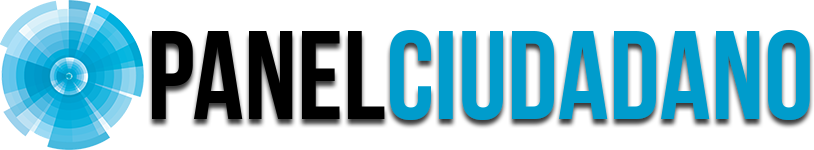
<style>
.page{position:relative;width:814px;height:150px;background:#ffffff}
.page>*{position:absolute;margin:0}
.t1{font:125px "BebasNeueBold";color:#009ccc}
.t2{font:125px "BebasNeueBold";color:#000000}
</style>
<div class="page">
<p class="t1" style="left:152px;top:30px;width:658px;height:90px"><span class="t2">PANEL</span>CIUDADANO</p>
</div>
